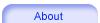
<style>
.page{position:relative;width:100px;height:23px;background:#e1e4fc}
.page>*{position:absolute;margin:0}
.t1{font:11px "ArialMT";color:#092ff6}
</style>
<div class="page">
<p class="t1" style="left:34px;top:12px;width:29px;height:8px">About</p>
</div>
